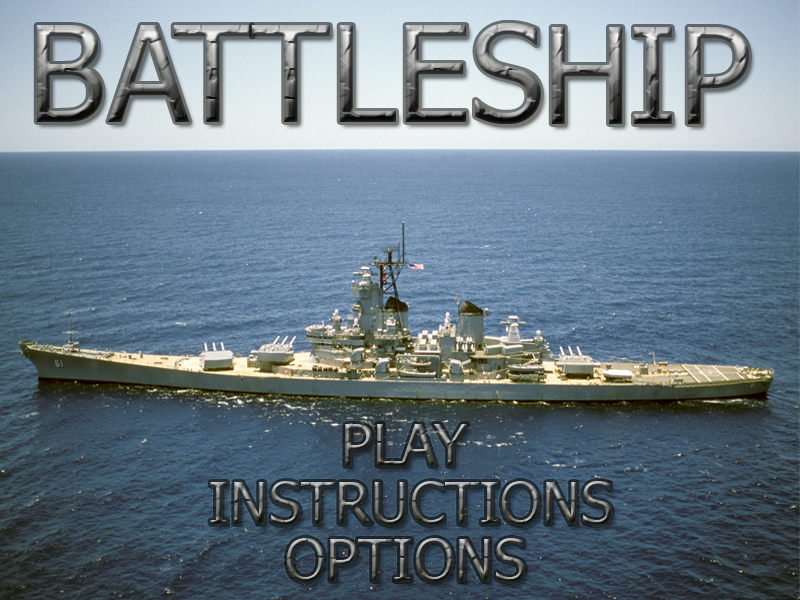
<style>
.page{position:relative;width:800px;height:600px}
.page>*{position:absolute;margin:0}
.t1{font:133.3px "Tahoma"}
.t2{font:58.3px "Tahoma"}
</style>
<div class="page">
<p class="t1" style="left:36px;top:25px;width:67px;height:97px">B</p>
<p class="t1" style="left:108px;top:25px;width:82px;height:97px">A</p>
<p class="t1" style="left:173px;top:25px;width:79px;height:97px">T</p>
<p class="t1" style="left:251px;top:25px;width:79px;height:97px">T</p>
<p class="t1" style="left:339px;top:25px;width:57px;height:97px">L</p>
<p class="t1" style="left:405px;top:25px;width:62px;height:97px">E</p>
<p class="t1" style="left:475px;top:23px;width:66px;height:101px">S</p>
<p class="t1" style="left:551px;top:27px;width:72px;height:97px">H</p>
<p class="t1" style="left:634px;top:27px;width:38px;height:97px">I</p>
<p class="t1" style="left:687px;top:27px;width:62px;height:97px">P</p>
<p class="t2" style="left:345px;top:424px;width:123px;height:42px">PLAY</p>
<p class="t2" style="left:210px;top:481px;width:402px;height:44px">INSTRUCTIONS</p>
<p class="t2" style="left:286px;top:538px;width:239px;height:44px">OPTIONS</p>
</div>
